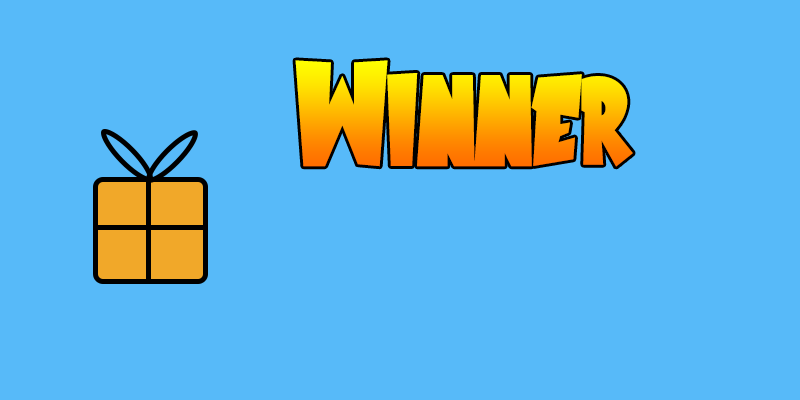
<style>
.page{position:relative;width:800px;height:400px;background:#57baf9}
.page>*{position:absolute;margin:0}
.t1{font:150px "SaiyanSans"}
</style>
<div class="page">
<p class="t1" style="left:295px;top:60px;width:338px;height:107px">Winner</p>
</div>
